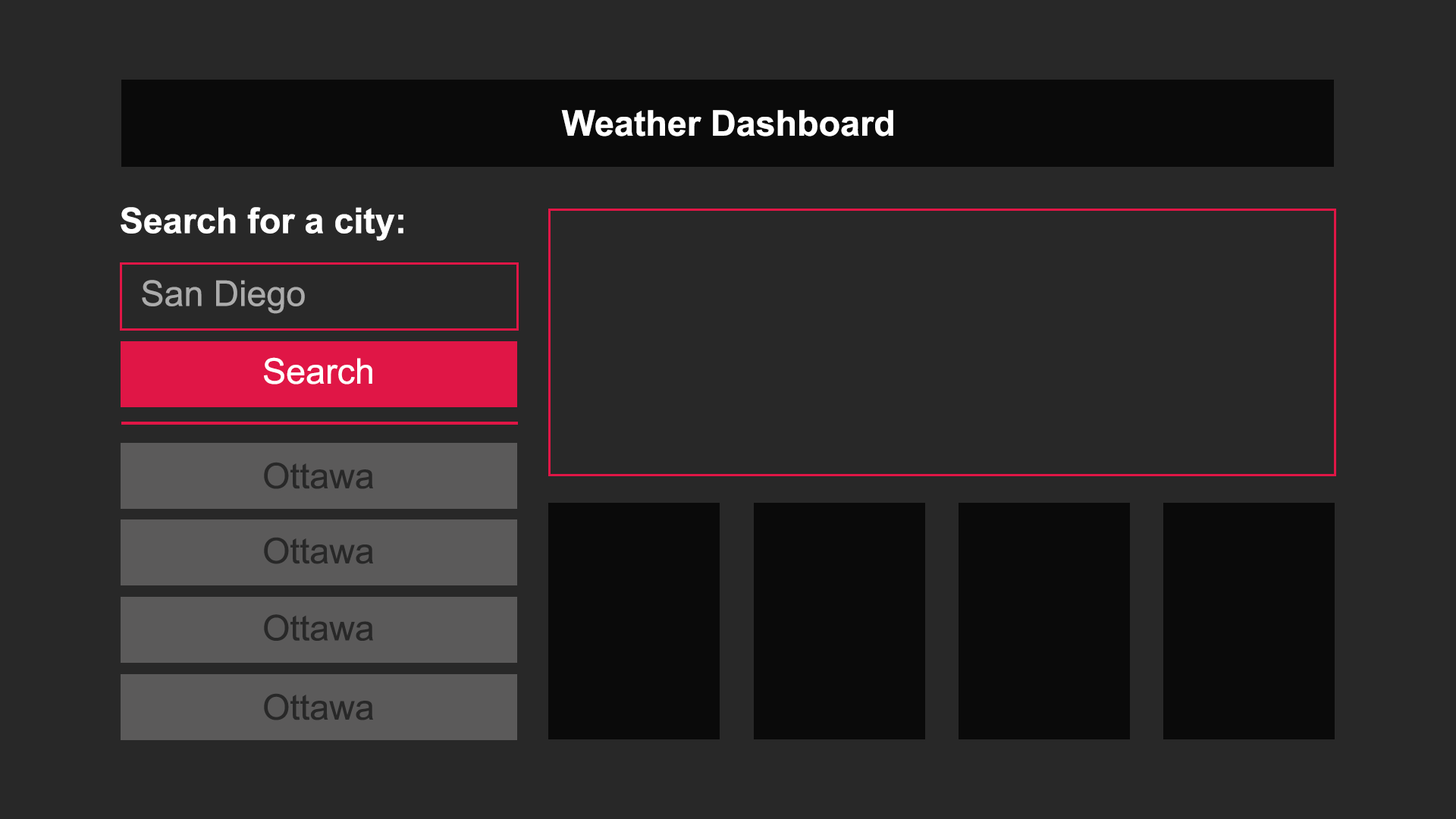
<style>
.page{position:relative;width:1456px;height:819px;background:#282828}
.page>*{position:absolute;margin:0}
.t1{font:35.4px "Arial-BoldMT";color:#ffffff}
.t2{font:35.4px "ArialMT";color:#ababab}
.t3{font:35.4px "ArialMT";color:#ffffff}
.t4{font:35.4px "ArialMT";color:#282828}
</style>
<div class="page">
<p class="t1" style="left:561px;top:110px;width:332px;height:26px">Weather Dashboard</p>
<p class="t1" style="left:121px;top:207px;width:282px;height:34px">Search for a city:</p>
<p class="t2" style="left:142px;top:280px;width:163px;height:34px">San Diego</p>
<p class="t3" style="left:264px;top:357px;width:108px;height:27px">Search</p>
<p class="t4" style="left:264px;top:462px;width:109px;height:27px">Ottawa</p>
<p class="t4" style="left:264px;top:537px;width:109px;height:27px">Ottawa</p>
<p class="t4" style="left:264px;top:614px;width:109px;height:27px">Ottawa</p>
<p class="t4" style="left:264px;top:693px;width:109px;height:27px">Ottawa</p>
</div>
